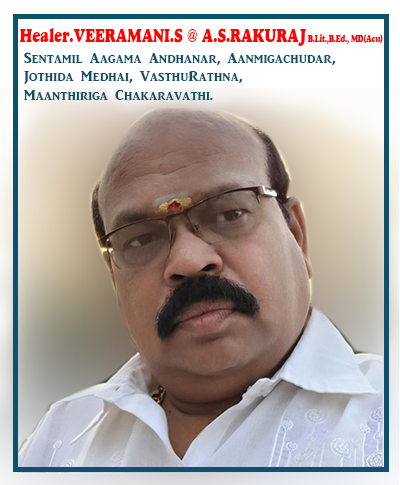
<style>
.page{position:relative;width:400px;height:485px}
.page>*{position:absolute;margin:0}
.t1{font:19.9px "AlfredoHeavy";color:#ff0301;scale:0.72 1}
.t2{font:9.5px "AlfredoHeavy";color:#ff0301;scale:0.72 1}
.t3{font:15.3px "ARJULIAN";color:#0f506c}
</style>
<div class="page">
<p class="t1" style="left:20px;top:28px;width:363px;height:18px">Healer.VEERAMANI.S @ A.S.RAKURAJ<span class="t2"> B.Lit.,B.Ed., MD(Acu)</span></p>
<p class="t3" style="left:24px;top:52px;width:311px;height:48px">Sentamil Aagama Andhanar, Aanmigachudar,<br>Jothida Medhai, VasthuRathna, <br>Maanthiriga Chakaravathi.</p>
</div>
